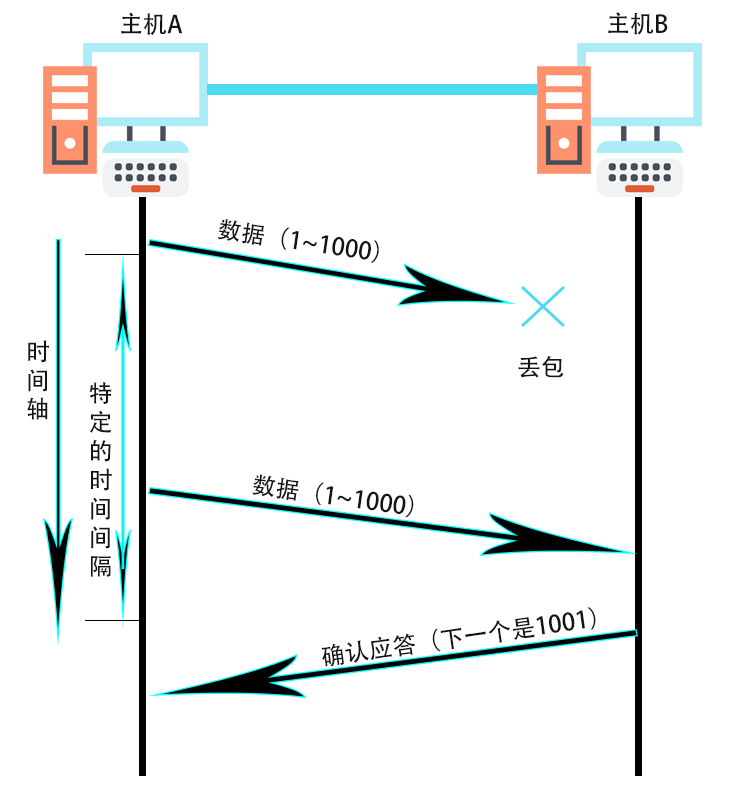
<style>
.page{position:relative;width:752px;height:800px;background:#ffffff}
.page>*{position:absolute;margin:0}
.t1{font:24px "AdobeHeitiStd-Regular";color:#151414}
</style>
<div class="page">
<p class="t1" style="left:121px;top:12px;width:62px;height:23px">主机A</p>
<p class="t1" style="left:608px;top:12px;width:60px;height:23px">主机B</p>
<p class="t1" style="left:217px;top:219px;width:162px;height:44px;rotate:8deg">数据（1~1000）</p>
<p class="t1" style="left:27px;top:340px;width:22px;height:80px">时<br>间<br>轴</p>
<p class="t1" style="left:518px;top:355px;width:46px;height:23px">丢包</p>
<p class="t1" style="left:89px;top:382px;width:23px;height:195px">特<br>定<br>的<br>时<br>间<br>间<br>隔</p>
<p class="t1" style="left:252px;top:474px;width:162px;height:44px;rotate:8deg">数据（1~1000）</p>
<p class="t1" style="left:321px;top:607px;width:275px;height:60px;rotate:-8deg">确认应答（下一个是1001）</p>
</div>
